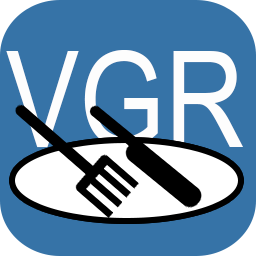
<style>
.page{position:relative;width:256px;height:256px;background:#3673a7}
.page>*{position:absolute;margin:0}
.t1{font:133.8px "ArialMT";color:#fefefe;scale:0.82 1}
</style>
<div class="page">
<p class="t1" style="left:6px;top:50px;width:237px;height:98px">VGR</p>
</div>
